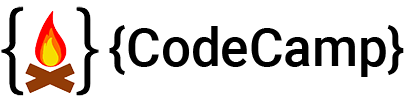
<style>
.page{position:relative;width:405px;height:100px;background:#ffffff}
.page>*{position:absolute;margin:0}
.t1{font:52.8px "Roboto-Medium";color:#000000}
</style>
<div class="page">
<p class="t1" style="left:109px;top:25px;width:295px;height:52px">{CodeCamp}</p>
</div>
